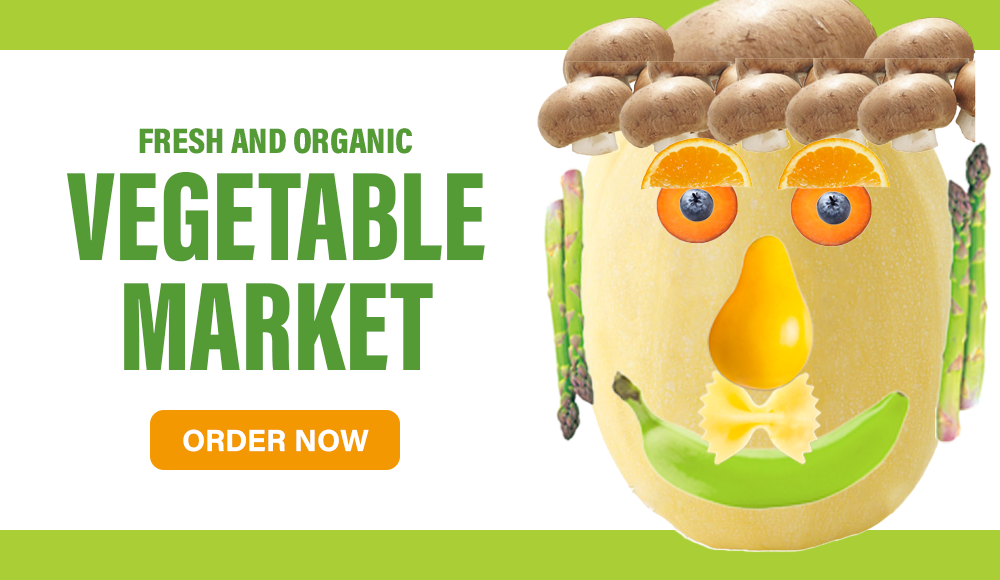
<style>
.page{position:relative;width:1000px;height:580px;background:#ffffff}
.page>*{position:absolute;margin:0}
.t1{font:36px "AcuminConcept-CondensedBlack";color:#549b35}
.t2{font:130px/110px "AcuminConcept-ExtraCondensedBlack";color:#549b35}
.t3{font:30.4px "AcuminConcept-Bold";color:#ffffff}
</style>
<div class="page">
<p class="t1" style="left:139px;top:128px;width:273px;height:26px">FRESH AND ORGANIC</p>
<p class="t2" style="left:66px;top:171px;width:419px;height:199px;text-align:center">VEGETABLE<br>MARKET</p>
<p class="t3" style="left:183px;top:429px;width:186px;height:23px">ORDER NOW</p>
</div>
